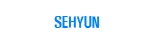
<style>
.page{position:relative;width:150px;height:45px;background:#ffffff}
.page>*{position:absolute;margin:0}
.t1{font:13.3px "H2hdrM";color:#0081ff}
</style>
<div class="page">
<p class="t1" style="left:54px;top:16px;width:46px;height:12px">SEHYUN</p>
</div>
